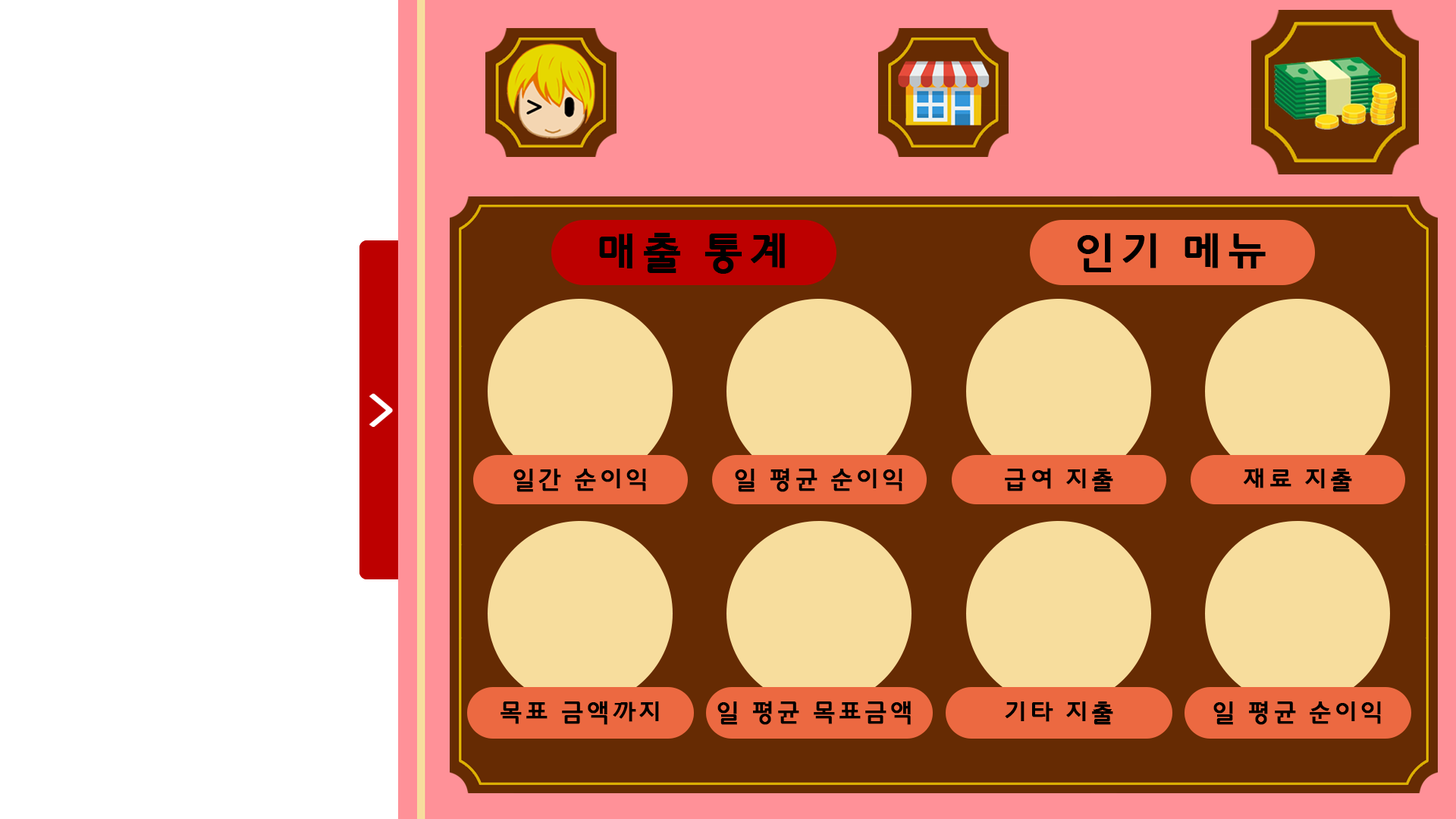
<style>
.page{position:relative;width:1456px;height:819px;background:#ffffff}
.page>*{position:absolute;margin:0}
.t1{font:44.2px "HYkanB";color:#000000;font-weight:bold}
.t2{font:25.3px "HYkanB";color:#000000;font-weight:bold}
</style>
<div class="page">
<p class="t1" style="left:599px;top:233px;width:186px;height:41px">매출 통계</p>
<p class="t1" style="left:1077px;top:233px;width:189px;height:39px">인기 메뉴</p>
<p class="t2" style="left:513px;top:469px;width:133px;height:23px">일간 순이익</p>
<p class="t2" style="left:735px;top:468px;width:167px;height:24px">일 평균 순이익</p>
<p class="t2" style="left:1005px;top:468px;width:108px;height:24px">급여 지출</p>
<p class="t2" style="left:1243px;top:468px;width:109px;height:24px">재료 지출</p>
<p class="t2" style="left:500px;top:701px;width:159px;height:24px">목표 금액까지</p>
<p class="t2" style="left:717px;top:701px;width:194px;height:24px">일 평균 목표금액</p>
<p class="t2" style="left:1005px;top:701px;width:108px;height:24px">기타 지출</p>
<p class="t2" style="left:1213px;top:701px;width:168px;height:24px">일 평균 순이익</p>
</div>
